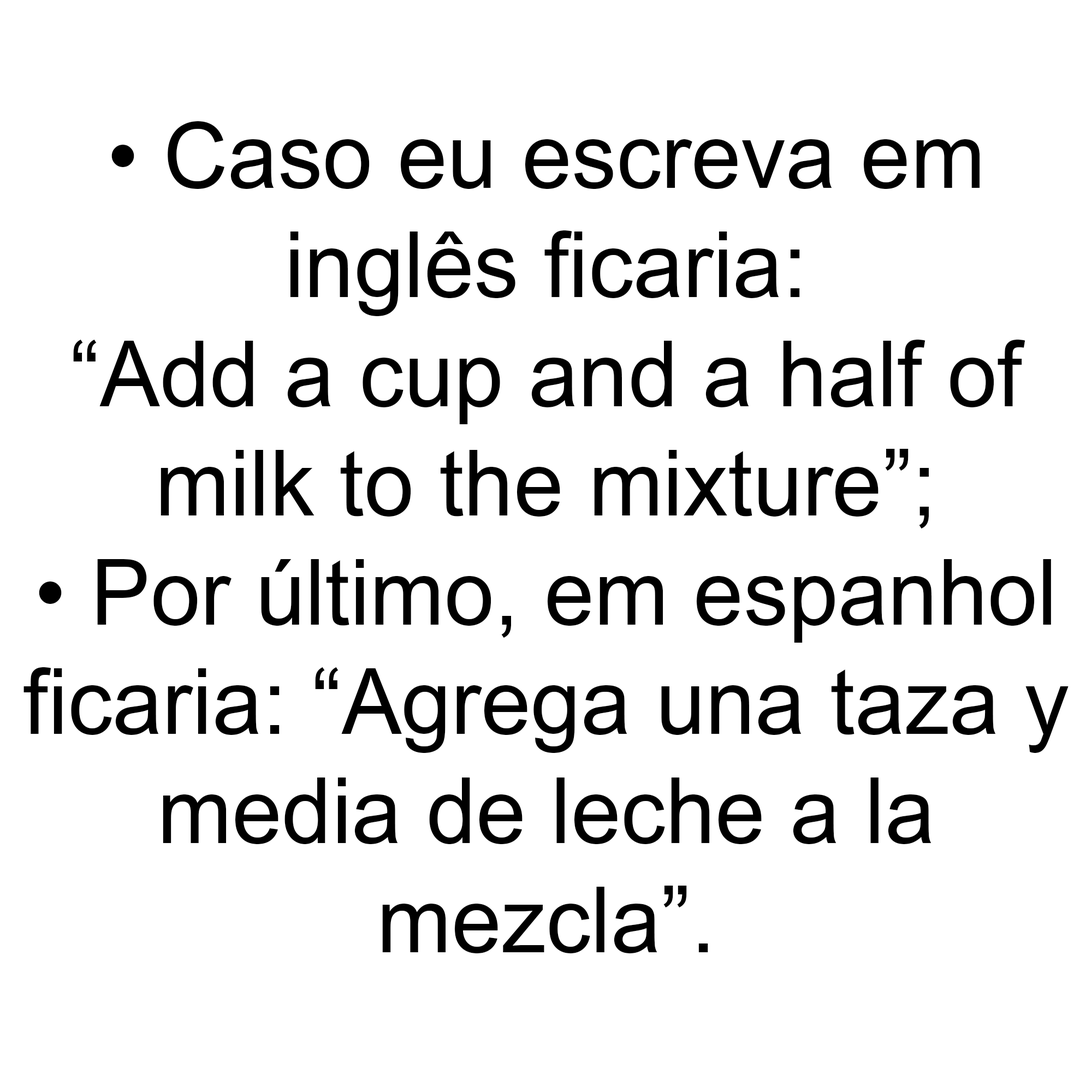
<style>
.page{position:relative;width:1092px;height:1092px;background:#ffffff}
.page>*{position:absolute;margin:0}
.t1{font:91px "ArialMT";color:#000000}
</style>
<div class="page">
<p class="t1" style="left:23px;top:121px;width:1046px;height:832px;text-align:center">• Caso eu escreva em<br>inglês ficaria:<br>“Add a cup and a half of<br>milk to the mixture”;<br>• Por último, em espanhol<br>ficaria: “Agrega una taza y<br>media de leche a la<br>mezcla”.</p>
</div>
